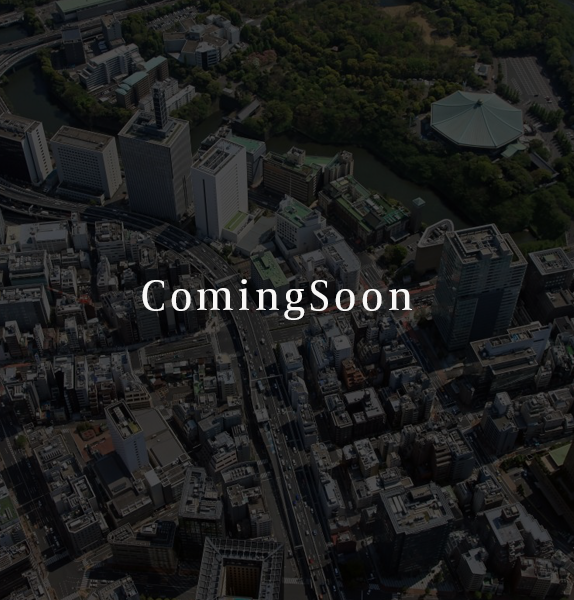
<style>
.page{position:relative;width:574px;height:600px}
.page>*{position:absolute;margin:0}
.t1{font:42px "AllianzSerif";letter-spacing:0.1em;color:#f8f7f6}
</style>
<div class="page">
<p class="t1" style="left:142px;top:279px;width:270px;height:41px">ComingSoon</p>
</div>
